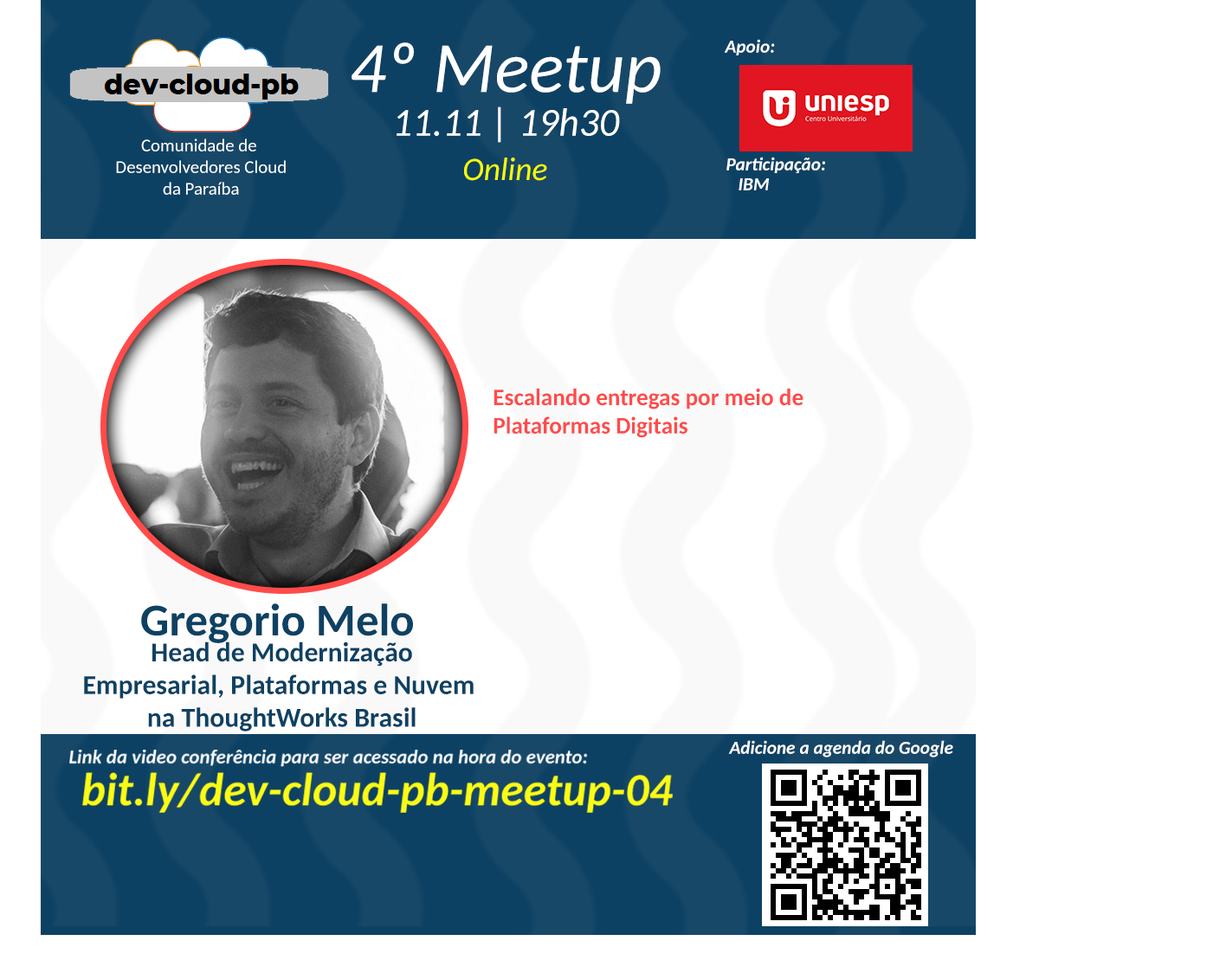
<style>
.page{position:relative;width:1226px;height:973px;background:#ffffff}
.page>*{position:absolute;margin:0}
.t1{font:18.4px "Carlito-BoldItalic";color:#ffffff}
.t2{font:72.3px "Carlito-Italic";color:#ffffff}
.t3{font:39.6px "Carlito-Italic";color:#ffffff}
.t4{font:18px "Carlito";color:#ffffff}
.t5{font:32.4px "Carlito-Italic";color:#f8fb00}
.t6{font:23.5px "Carlito-Bold";color:#ff4b4a}
.t7{font:45.5px "Carlito-Bold";color:#0d4163}
.t8{font:27.3px "Carlito-Bold";color:#0d4163}
</style>
<div class="page">
<p class="t1" style="left:724px;top:39px;width:51px;height:16px">Apoio:</p>
<p class="t2" style="left:351px;top:42px;width:309px;height:62px">4º Meetup</p>
<p class="t3" style="left:396px;top:106px;width:224px;height:37px">11.11 | 19h30</p>
<p class="t4" style="left:116px;top:138px;width:170px;height:57px;text-align:center">Comunidade de <br>Desenvolvedores Cloud<br>da Paraíba</p>
<p class="t5" style="left:464px;top:158px;width:83px;height:23px">Online</p>
<p class="t1" style="left:726px;top:157px;width:99px;height:16px">Participação:</p>
<p class="t1" style="left:738px;top:178px;width:31px;height:12px">IBM</p>
<p class="t6" style="left:493px;top:388px;width:310px;height:50px">Escalando entregas por meio de <br>Plataformas Digitais</p>
<p class="t7" style="left:141px;top:603px;width:272px;height:40px">Gregorio Melo</p>
<p class="t8" style="left:84px;top:641px;width:389px;height:90px;text-align:center">Head de Modernização<br>Empresarial, Plataformas e Nuvem <br>na ThoughtWorks Brasil</p>
<p class="t1" style="left:728px;top:740px;width:225px;height:17px">Adicione a agenda do Google</p>
</div>
